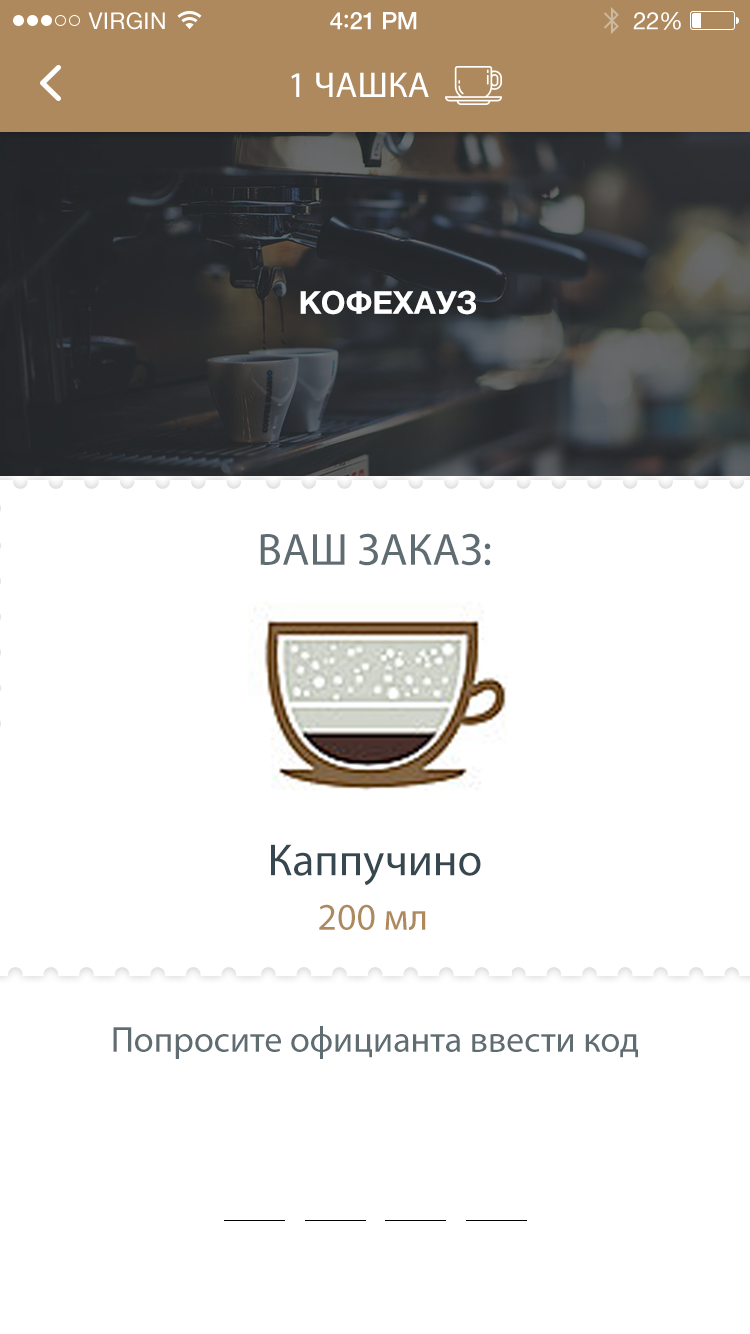
<style>
.page{position:relative;width:750px;height:1334px;background:#ffffff}
.page>*{position:absolute;margin:0}
.t1{font:23px "HelveticaNeue";letter-spacing:0.02em;color:#ffffff}
.t2{font:24px "HelveticaNeue-Medium";letter-spacing:-0.02em;color:#ffffff}
.t3{font:26px "Avenir-Medium";letter-spacing:-0.02em;color:#ffffff}
.t4{font:24px "HelveticaNeue";letter-spacing:-0.02em;color:#ffffff}
.t5{font:36px "MyriadPro-Regular";color:#ffffff;text-transform:uppercase}
.t6{font:31.7px "HelveticaNeueCyr-Bold";color:#ffffff}
.t7{font:45.3px "MyriadPro-Regular";color:#5f6c72}
.t8{font:45.3px "MyriadPro-Regular";color:#37474f}
.t9{font:38px "MyriadPro-Regular";color:#ae895d}
.t10{font:36.2px "MyriadPro-Regular";color:#5f6c72}
</style>
<div class="page">
<p class="t1" style="left:88px;top:12px;width:77px;height:18px">VIRGIN</p>
<p class="t2" style="left:330px;top:12px;width:87px;height:18px">4<span class="t3">:</span>21 PM</p>
<p class="t4" style="left:633px;top:12px;width:48px;height:18px">22%</p>
<p class="t5" style="left:291px;top:72px;width:138px;height:25px">1 чашка</p>
<p class="t6" style="left:300px;top:290px;width:176px;height:25px">КОФЕХАУЗ</p>
<p class="t7" style="left:260px;top:533px;width:231px;height:33px">ВАШ ЗАКАЗ:</p>
<p class="t8" style="left:271px;top:844px;width:210px;height:42px">Каппучино</p>
<p class="t9" style="left:319px;top:904px;width:107px;height:26px">200 мл</p>
<p class="t10" style="left:113px;top:1026px;width:525px;height:33px">Попросите официанта ввести код</p>
</div>
